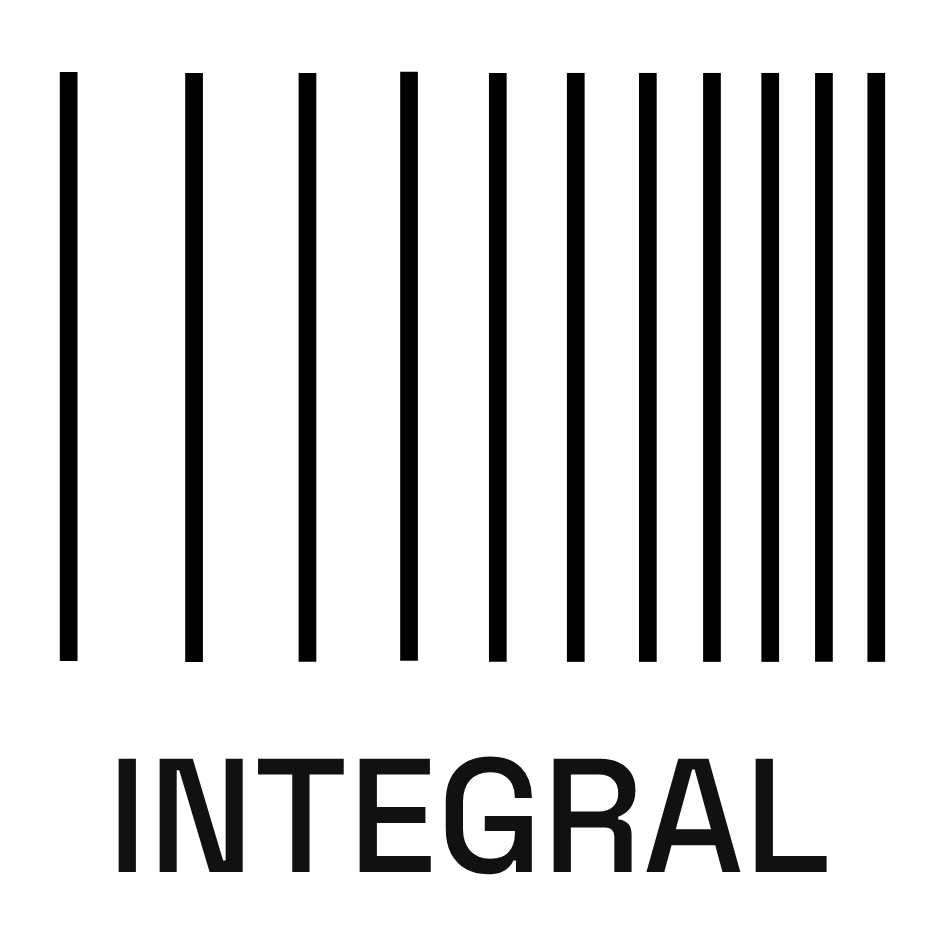
<style>
.page{position:relative;width:944px;height:944px;background:#ffffff}
.page>*{position:absolute;margin:0}
.t1{font:161.8px "SpaceGroteskLight-Medium";color:#111111}
</style>
<div class="page">
<p class="t1" style="left:118px;top:756px;width:709px;height:119px">INTEGRAL</p>
</div>
